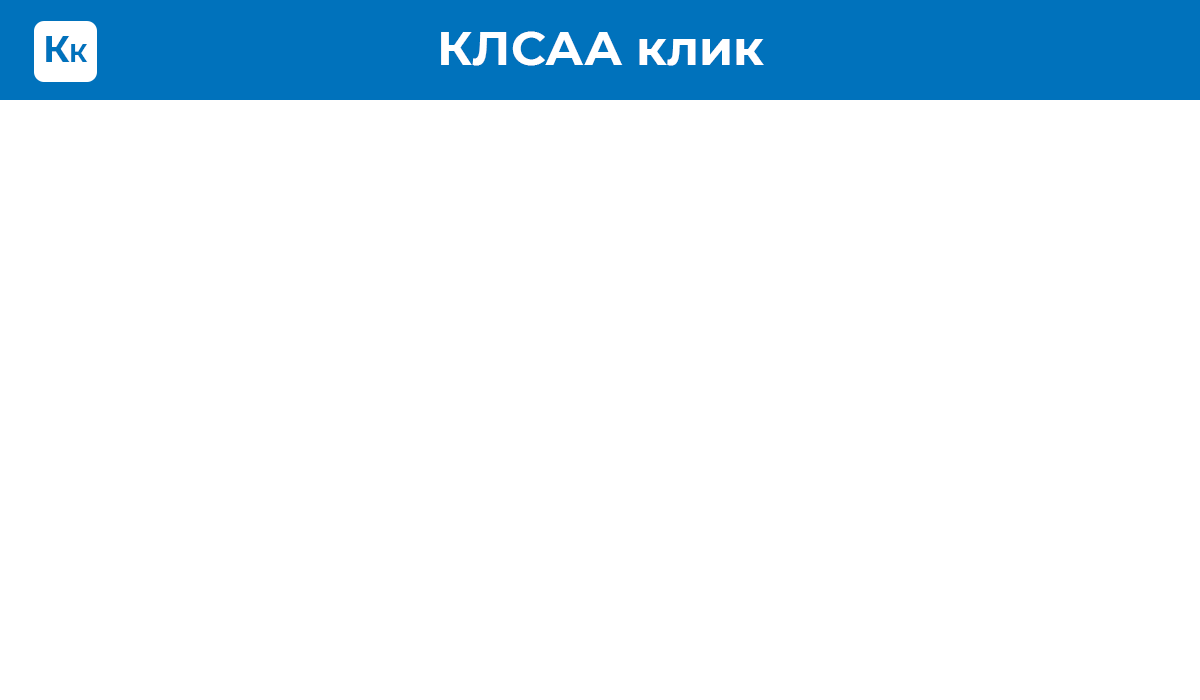
<style>
.page{position:relative;width:1200px;height:700px;background:#ffffff}
.page>*{position:absolute;margin:0}
.t1{font:36.4px "Montserrat-Bold";color:#0072bc}
.t2{font:48px "Montserrat-Bold";color:#ffffff}
.t3{font:25.1px "Montserrat-Bold";color:#0072bc}
</style>
<div class="page">
<p class="t1" style="left:46px;top:36px;width:24px;height:26px">К</p>
<p class="t2" style="left:441px;top:31px;width:323px;height:35px">КЛСАА клик</p>
<p class="t3" style="left:71px;top:44px;width:17px;height:18px">К</p>
</div>
